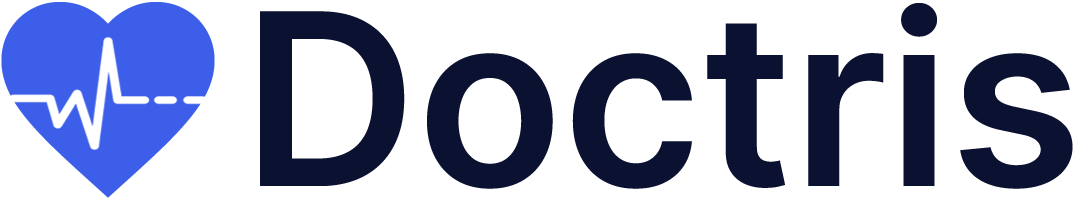
<style>
.page{position:relative;width:1091px;height:200px;background:#ffffff}
.page>*{position:absolute;margin:0}
.t1{font:240px "Inter-SemiBold";color:#0b1231}
</style>
<div class="page">
<p class="t1" style="left:260px;top:3px;width:813px;height:186px">Doctris</p>
</div>
